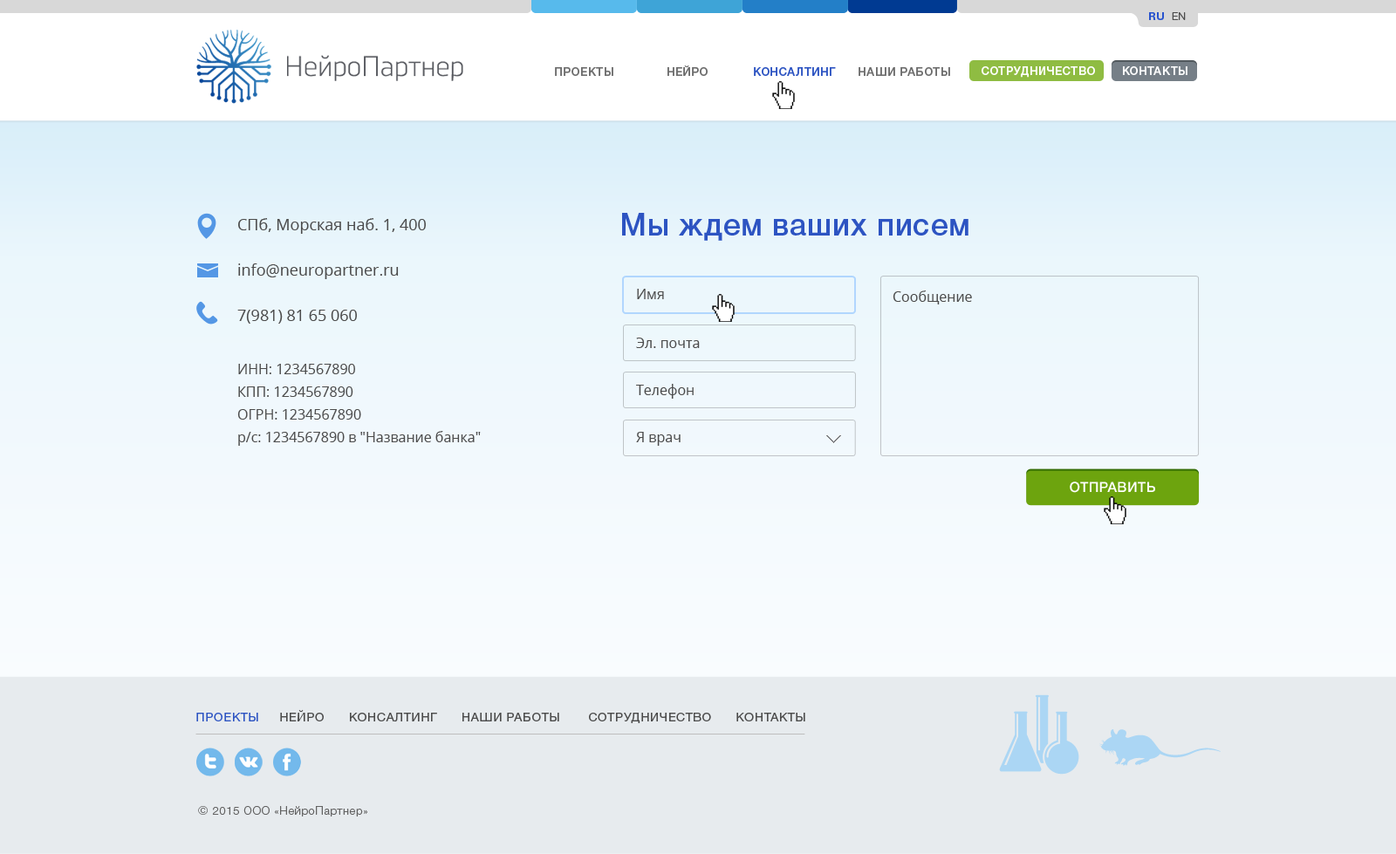
<style>
.page{position:relative;width:1396px;height:854px}
.page>*{position:absolute;margin:0}
.t1{font:10.5px "HelveticaNeueCyr-Bold";letter-spacing:0.05em;color:#2853ce;text-transform:uppercase}
.t2{font:10.5px "HelveticaNeueCyr-Light";letter-spacing:0.05em;color:#4b4b4b;text-transform:uppercase}
.t3{font:11.3px "HelveticaNeueCyr-Medium";letter-spacing:0.05em;color:#6d6d6d;text-transform:uppercase}
.t4{font:11.3px "HelveticaNeueCyr-Medium";letter-spacing:0.05em;color:#2d54c2;text-transform:uppercase}
.t5{font:11.3px "HelveticaNeueCyr-Medium";letter-spacing:0.05em;color:#ffffff;text-transform:uppercase}
.t6{font:15.7px/22.7px "OpenSans";color:#4b4b4b}
.t7{font:30.5px "HelveticaNeueCyr-Medium";letter-spacing:0.02em;color:#2d54c2}
.t8{font:14px "OpenSans";color:#4b4b4b}
.t9{font:14px/22.7px "OpenSans";color:#4b4b4b}
.t10{font:14px "HelveticaNeueCyr-Medium";letter-spacing:0.02em;color:#ffffff;text-transform:uppercase}
.t11{font:12.2px "HelveticaNeueCyr-Roman";letter-spacing:0.05em;color:#4b4b4b;text-transform:uppercase}
.t12{font:12.2px "HelveticaNeueCyr-Roman";letter-spacing:0.05em;color:#2d54c2;text-transform:uppercase}
.t13{font:11.3px "HelveticaNeueCyr-Light";letter-spacing:0.05em;color:#636363}
.t14{font:12.2px "HelveticaNeueCyr-Roman";letter-spacing:0.05em;color:#636363}
</style>
<div class="page">
<p class="t1" style="left:1149px;top:12px;width:37px;height:8px">Ru  <span class="t2">En</span></p>
<p class="t3" style="left:555px;top:65px;width:395px;height:11px">Проекты              Нейро            <span class="t4">Консалтинг </span>     Наши работы</p>
<p class="t5" style="left:982px;top:66px;width:205px;height:12px">Сотрудничество       Контакты</p>
<p class="t6" style="left:237px;top:218px;width:189px;height:106px">СПб, Морская наб. 1, 400<br><br>info@neuropartner.ru<br><br>7(981) 81 65 060</p>
<p class="t7" style="left:622px;top:213px;width:346px;height:28px">Мы ждем ваших писем</p>
<p class="t8" style="left:637px;top:289px;width:27px;height:10px">Имя</p>
<p class="t8" style="left:893px;top:291px;width:79px;height:14px">Сообщение</p>
<p class="t8" style="left:636px;top:338px;width:64px;height:10px">Эл. почта</p>
<p class="t9" style="left:237px;top:364px;width:244px;height:82px">ИНН: 1234567890<br>КПП: 1234567890<br>ОГРН: 1234567890<br>р/с: 1234567890 в "Название банка"</p>
<p class="t8" style="left:636px;top:384px;width:58px;height:15px">Телефон</p>
<p class="t8" style="left:636px;top:432px;width:45px;height:14px">Я врач</p>
<p class="t10" style="left:1070px;top:482px;width:85px;height:11px">отправить</p>
<p class="t11" style="left:196px;top:709px;width:609px;height:14px"><span class="t12">Проекты</span>     Нейро      Консалтинг      Наши работы       Сотрудничество      Контакты</p>
<p class="t13" style="left:198px;top:806px;width:169px;height:11px"><span class="t14">© </span>2015 ООО «НейроПартнер»</p>
</div>
